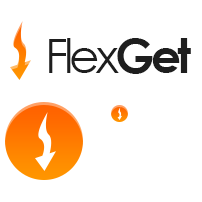
<style>
.page{position:relative;width:202px;height:202px;background:#ffffff}
.page>*{position:absolute;margin:0}
.t1{font:47px "CenturyGothic-Bold";letter-spacing:-0.08em;color:#1e1e1e}
.t2{font:47px "CenturyGothic";letter-spacing:-0.08em;color:#1e1e1e}
</style>
<div class="page">
<p class="t1" style="left:49px;top:38px;width:142px;height:36px"><span class="t2">Fl</span><span class="t2">e</span><span class="t2">x</span>Get</p>
</div>
